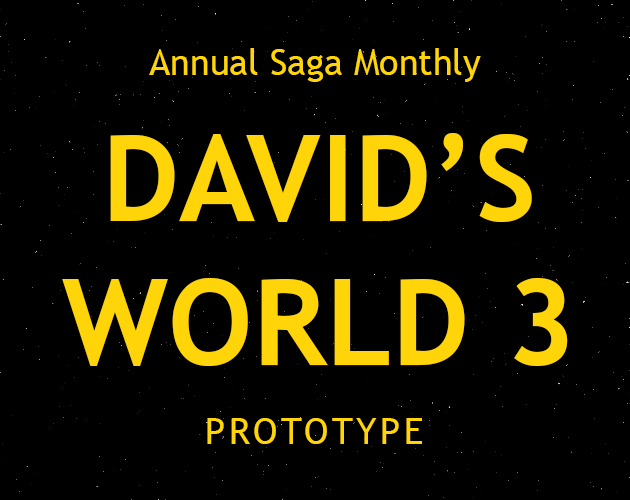
<style>
.page{position:relative;width:630px;height:500px;background:#000000}
.page>*{position:absolute;margin:0}
.t1{font:36px "TrebuchetMS";color:#ffd409}
.t2{font:120px "TrebuchetMS-Bold";color:#ffd409}
.t3{font:36px "TrebuchetMS";letter-spacing:0.1em;color:#ffd409}
</style>
<div class="page">
<p class="t1" style="left:149px;top:48px;width:332px;height:34px">Annual Saga Monthly</p>
<p class="t2" style="left:62px;top:133px;width:506px;height:233px;text-align:center">DAVID’S<br>WORLD 3</p>
<p class="t3" style="left:207px;top:418px;width:215px;height:26px">PROTOTYPE</p>
</div>
